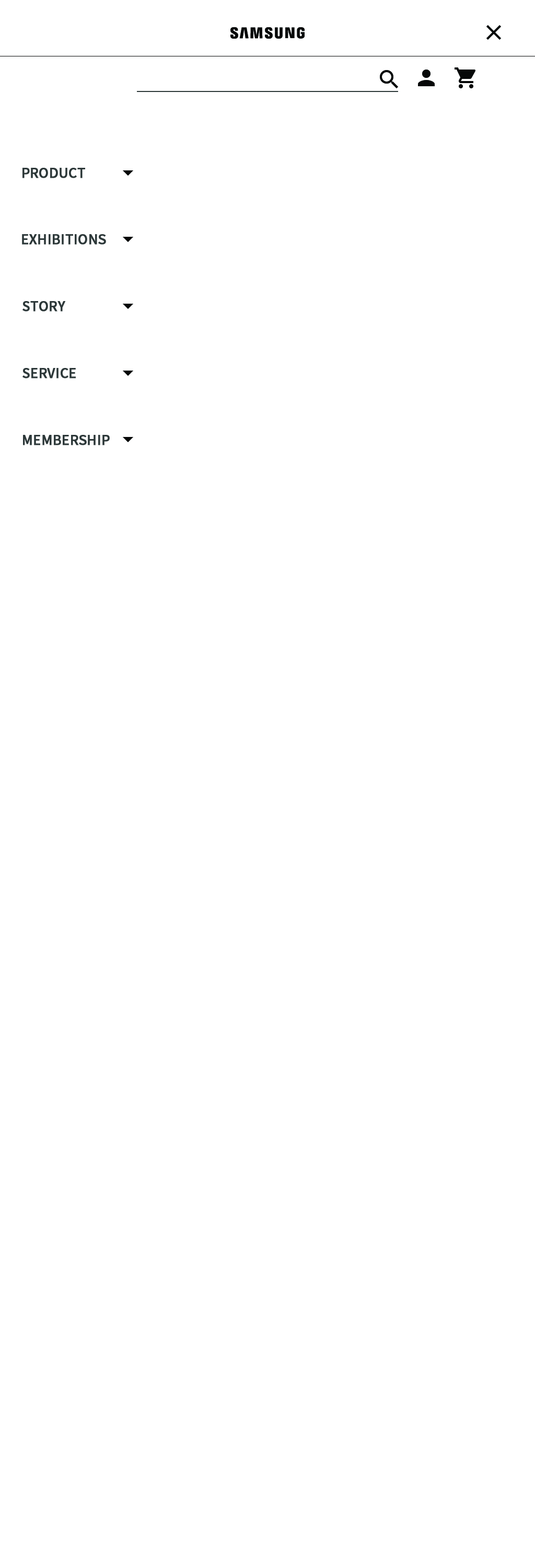
<style>
.page{position:relative;width:535px;height:1568px;background:#ffffff}
.page>*{position:absolute;margin:0}
.t1{font:13.1px "NotoSansKR-Medium";color:#2d3839;font-weight:bold}
</style>
<div class="page">
<p class="t1" style="left:22px;top:168px;width:63px;height:10px">PRODUCT</p>
<p class="t1" style="left:22px;top:234px;width:84px;height:11px">EXHIBITIONS</p>
<p class="t1" style="left:22px;top:301px;width:43px;height:11px">STORY</p>
<p class="t1" style="left:22px;top:368px;width:54px;height:10px">SERVICE</p>
<p class="t1" style="left:23px;top:435px;width:87px;height:10px">MEMBERSHIP</p>
</div>
